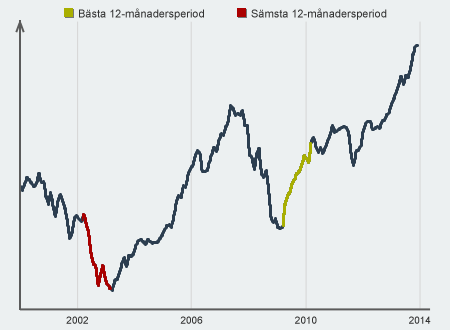
<style>
.page{position:relative;width:450px;height:330px;background:#ecf0f1}
.page>*{position:absolute;margin:0}
.t1{font:11px "ArialMT";color:#333333}
.t2{font:10px "ArialMT";color:#333333}
</style>
<div class="page">
<p class="t1" style="left:79px;top:8px;width:125px;height:12px">Bästa 12-månadersperiod</p>
<p class="t1" style="left:251px;top:8px;width:136px;height:12px">Sämsta 12-månadersperiod</p>
<p class="t2" style="left:66px;top:316px;width:22px;height:8px">2002</p>
<p class="t2" style="left:180px;top:316px;width:23px;height:8px">2006</p>
<p class="t2" style="left:295px;top:316px;width:22px;height:8px">2010</p>
<p class="t2" style="left:409px;top:316px;width:22px;height:8px">2014</p>
</div>
